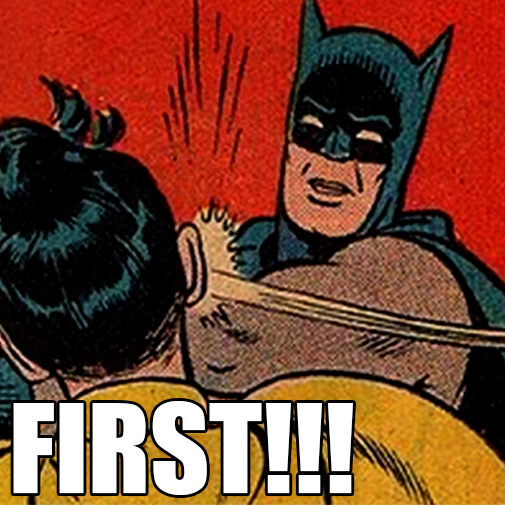
<style>
.page{position:relative;width:505px;height:505px}
.page>*{position:absolute;margin:0}
.t1{font:114.2px "Impact";color:#ffffff}
</style>
<div class="page">
<p class="t1" style="left:13px;top:401px;width:340px;height:94px">FIRST!!!</p>
</div>
